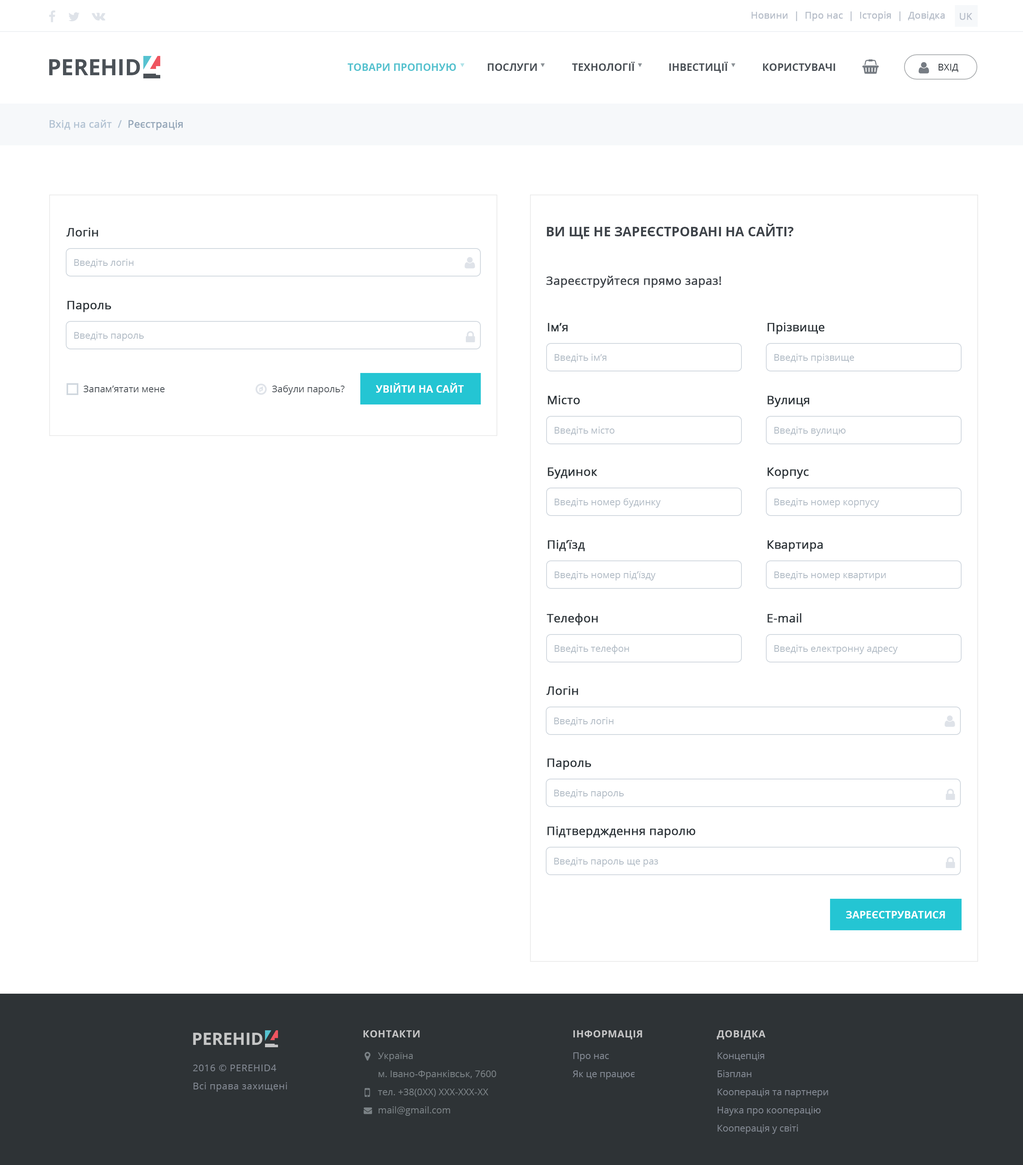
<style>
.page{position:relative;width:1023px;height:1165px;background:#ffffff}
.page>*{position:absolute;margin:0}
.t1{font:9.5px "OpenSans";color:#b7bec9;font-weight:bold}
.t2{font:22.5px "OpenSans-Bold";color:#4b5157;text-transform:uppercase}
.t3{font:10.2px "OpenSans-Bold";color:#56c2cf;text-transform:uppercase}
.t4{font:10.2px "OpenSans-Bold";color:#4b5157;text-transform:uppercase}
.t5{font:9.5px "OpenSans";color:#2f353b;text-transform:uppercase}
.t6{font:10.2px "OpenSans";color:#b3c3d3;font-weight:bold}
.t7{font:10.2px "OpenSans";color:#94a6b8;font-weight:bold}
.t8{font:11.8px "OpenSans";color:#2e353a;font-weight:bold}
.t9{font:13px "OpenSans-Bold";color:#3f444a;text-transform:uppercase}
.t10{font:9.5px "OpenSans";color:#b1bbc5}
.t11{font:11.8px "OpenSans";color:#3f444a;font-weight:bold}
.t12{font:9.5px "OpenSans";color:#4b5157}
.t13{font:10.2px "OpenSans-Bold";color:#ffffff;text-transform:uppercase}
.t14{font:16.9px "OpenSans-Bold";color:#c5c6c6;text-transform:uppercase}
.t15{font:9.8px "OpenSans-Bold";letter-spacing:0.04em;color:#c5c5c6;text-transform:uppercase}
.t16{font:9.5px/18.1px "OpenSans";color:#7b8286}
.t17{font:9.5px/18.1px "OpenSans";color:#848a94}
.t18{font:9.5px/18.1px "OpenSans";letter-spacing:0.04em;color:#848a94}
.t19{font:9.5px/18.1px "OpenSans";letter-spacing:0.04em;color:#848a94;text-transform:uppercase}
</style>
<div class="page">
<p class="t1" style="left:752px;top:11px;width:193px;height:10px">Новини  |  Про нас  |  Історія  |  Довідка</p>
<p class="t1" style="left:960px;top:13px;width:13px;height:7px">UK</p>
<p class="t2" style="left:49px;top:59px;width:91px;height:16px">perehid</p>
<p class="t3" style="left:348px;top:63px;width:108px;height:8px">Товари пропоную</p>
<p class="t4" style="left:488px;top:63px;width:49px;height:8px">Послуги</p>
<p class="t4" style="left:572px;top:61px;width:63px;height:10px">Технології</p>
<p class="t4" style="left:669px;top:61px;width:59px;height:12px">Інвестиції</p>
<p class="t4" style="left:763px;top:63px;width:72px;height:8px">Користувачі</p>
<p class="t5" style="left:939px;top:64px;width:20px;height:8px">Вхід</p>
<p class="t6" style="left:50px;top:120px;width:133px;height:10px">Вхід на сайт  / <span class="t7"> Реєстрація</span></p>
<p class="t8" style="left:66px;top:228px;width:32px;height:9px">Логін</p>
<p class="t9" style="left:547px;top:224px;width:247px;height:15px">Ви ще не зареєстровані на сайті?</p>
<p class="t10" style="left:74px;top:259px;width:60px;height:8px">Введіть логін</p>
<p class="t11" style="left:546px;top:276px;width:176px;height:12px">Зареєструйтеся прямо зараз!</p>
<p class="t8" style="left:67px;top:301px;width:44px;height:11px">Пароль</p>
<p class="t8" style="left:548px;top:323px;width:20px;height:9px">Ім’я</p>
<p class="t8" style="left:768px;top:323px;width:57px;height:11px">Прізвище</p>
<p class="t10" style="left:74px;top:332px;width:70px;height:9px">Введіть пароль</p>
<p class="t10" style="left:555px;top:354px;width:52px;height:8px">Введіть ім’я</p>
<p class="t10" style="left:774px;top:354px;width:80px;height:9px">Введіть прізвище</p>
<p class="t12" style="left:84px;top:386px;width:81px;height:6px">Запам’ятати мене</p>
<p class="t12" style="left:272px;top:385px;width:73px;height:10px">Забули пароль?</p>
<p class="t13" style="left:376px;top:383px;width:88px;height:10px">Увійти на сайт</p>
<p class="t8" style="left:548px;top:395px;width:32px;height:10px">Місто</p>
<p class="t8" style="left:768px;top:396px;width:41px;height:11px">Вулиця</p>
<p class="t10" style="left:555px;top:427px;width:60px;height:8px">Введіть місто</p>
<p class="t10" style="left:774px;top:427px;width:72px;height:9px">Введіть вулицю</p>
<p class="t8" style="left:548px;top:468px;width:50px;height:11px">Будинок</p>
<p class="t8" style="left:768px;top:468px;width:41px;height:11px">Корпус</p>
<p class="t10" style="left:555px;top:498px;width:106px;height:10px">Введіть номер будинку</p>
<p class="t10" style="left:774px;top:498px;width:106px;height:10px">Введіть номер корпусу</p>
<p class="t8" style="left:548px;top:540px;width:37px;height:11px">Під’їзд</p>
<p class="t8" style="left:768px;top:540px;width:55px;height:12px">Квартира</p>
<p class="t10" style="left:555px;top:571px;width:101px;height:10px">Введіть номер під’їзду</p>
<p class="t10" style="left:774px;top:571px;width:112px;height:10px">Введіть номер квартири</p>
<p class="t8" style="left:547px;top:613px;width:51px;height:13px">Телефон</p>
<p class="t8" style="left:768px;top:613px;width:34px;height:10px">E-mail</p>
<p class="t10" style="left:555px;top:645px;width:74px;height:9px">Введіть телефон</p>
<p class="t10" style="left:774px;top:645px;width:124px;height:9px">Введіть електронну адресу</p>
<p class="t8" style="left:546px;top:686px;width:32px;height:9px">Логін</p>
<p class="t10" style="left:554px;top:717px;width:60px;height:9px">Введіть логін</p>
<p class="t8" style="left:548px;top:759px;width:43px;height:11px">Пароль</p>
<p class="t10" style="left:554px;top:789px;width:70px;height:10px">Введіть пароль</p>
<p class="t8" style="left:548px;top:826px;width:148px;height:12px">Підтвердждення паролю</p>
<p class="t10" style="left:554px;top:858px;width:105px;height:9px">Введіть пароль ще раз</p>
<p class="t13" style="left:846px;top:911px;width:99px;height:8px">Зареєструватися</p>
<p class="t14" style="left:193px;top:1033px;width:70px;height:12px">perehid</p>
<p class="t15" style="left:364px;top:1030px;width:56px;height:8px">Контакти</p>
<p class="t15" style="left:574px;top:1030px;width:68px;height:10px">Інформація</p>
<p class="t15" style="left:717px;top:1030px;width:49px;height:10px">Довідка</p>
<p class="t16" style="left:378px;top:1053px;width:118px;height:63px">Україна<br>м. Івано-Франківськ, 7600<br>тел. +38(0XX) XXX-XXX-XX<br>mail@gmail.com</p>
<p class="t17" style="left:573px;top:1053px;width:62px;height:27px">Про нас<br>Як це працює</p>
<p class="t17" style="left:718px;top:1052px;width:110px;height:82px">Концепція<br>Бізплан<br>Кооперація та партнери<br>Наука про кооперацію<br>Кооперація у світі</p>
<p class="t18" style="left:193px;top:1065px;width:94px;height:27px"><span class="t19">2016 © Perehid4<br></span>Всі права захищені</p>
</div>
